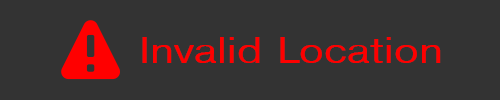
<style>
.page{position:relative;width:500px;height:100px;background:#333333}
.page>*{position:absolute;margin:0}
.t1{font:36px "Helvetica";color:#fe0000;scale:1.2 1}
</style>
<div class="page">
<p class="t1" style="left:142px;top:37px;width:299px;height:26px">Invalid Location</p>
</div>
